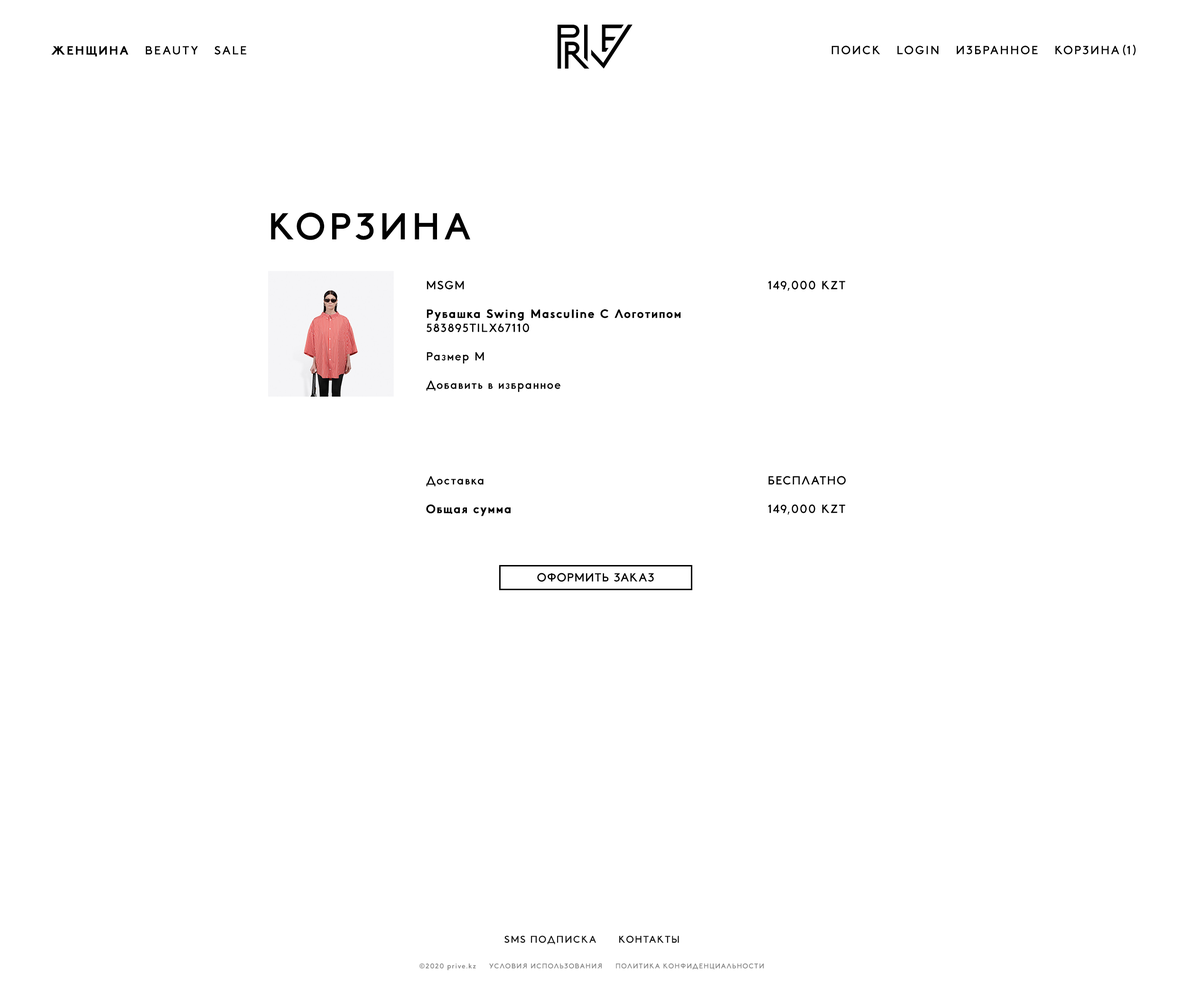
<style>
.page{position:relative;width:1191px;height:1001px;background:#ffffff}
.page>*{position:absolute;margin:0}
.t1{font:31.6px "PriveLogoCheck-Regular";letter-spacing:0.1em;color:#000000}
.t2{font:11.9px "PriveX-Regular";letter-spacing:0.15em;color:#000000;text-transform:uppercase}
.t3{font:11.9px "PriveX-Regular";letter-spacing:0.15em;color:#000000;text-transform:uppercase;font-weight:bold}
.t4{font:37.6px "PriveX-Regular";letter-spacing:0.15em;color:#000000;text-transform:uppercase}
.t5{font:11.9px "PriveX-Regular";letter-spacing:0.1em;color:#000000}
.t6{font:11.9px "PriveX-Regular";letter-spacing:0.1em;color:#000000;text-transform:uppercase}
.t7{font:11.9px "PriveX-Regular";letter-spacing:0.1em;color:#000000;font-weight:bold}
.t8{font:11.9px "PriveX-Regular";letter-spacing:0.075em;color:#000000;text-transform:uppercase}
.t9{font:9.9px "PriveX-Regular";letter-spacing:0.1em;color:#121212}
.t10{font:6.9px "PriveX-Regular";letter-spacing:0.1em;color:#848484}
</style>
<div class="page">
<p class="t1" style="left:558px;top:24px;width:75px;height:45px">F</p>
<p class="t2" style="left:51px;top:46px;width:195px;height:10px"><span class="t3">ЖЕНЩИНА </span>  beauty   sale</p>
<p class="t2" style="left:832px;top:45px;width:304px;height:11px">ПОИСК   login   избранное   КОРЗИНА (1)</p>
<p class="t4" style="left:271px;top:213px;width:200px;height:27px">КОРЗИНА</p>
<p class="t5" style="left:426px;top:280px;width:420px;height:112px"><span class="t6">MSGM                  149,000 kzt<br><br></span><span class="t7">Рубашка Swing Masculine С Логотипом <br></span>583895TILX67110<br><br>Размер M<br><br>Добавить в избранное</p>
<p class="t7" style="left:426px;top:476px;width:420px;height:40px"><span class="t5">Доставка                 </span><span class="t6">бесплатно <br></span>Общая сумма               <span class="t6">149,000 kzt</span></p>
<p class="t8" style="left:537px;top:573px;width:117px;height:9px">Оформить заказ</p>
<p class="t9" style="left:504px;top:936px;width:175px;height:9px">SMS ПОДПИСКА      КОНТАКТЫ</p>
<p class="t10" style="left:419px;top:963px;width:345px;height:7px">©2020 prive.kz     УСЛОВИЯ ИСПОЛЬЗОВАНИЯ     ПОЛИТИКА КОНФИДЕНЦИАЛЬНОСТИ</p>
</div>
